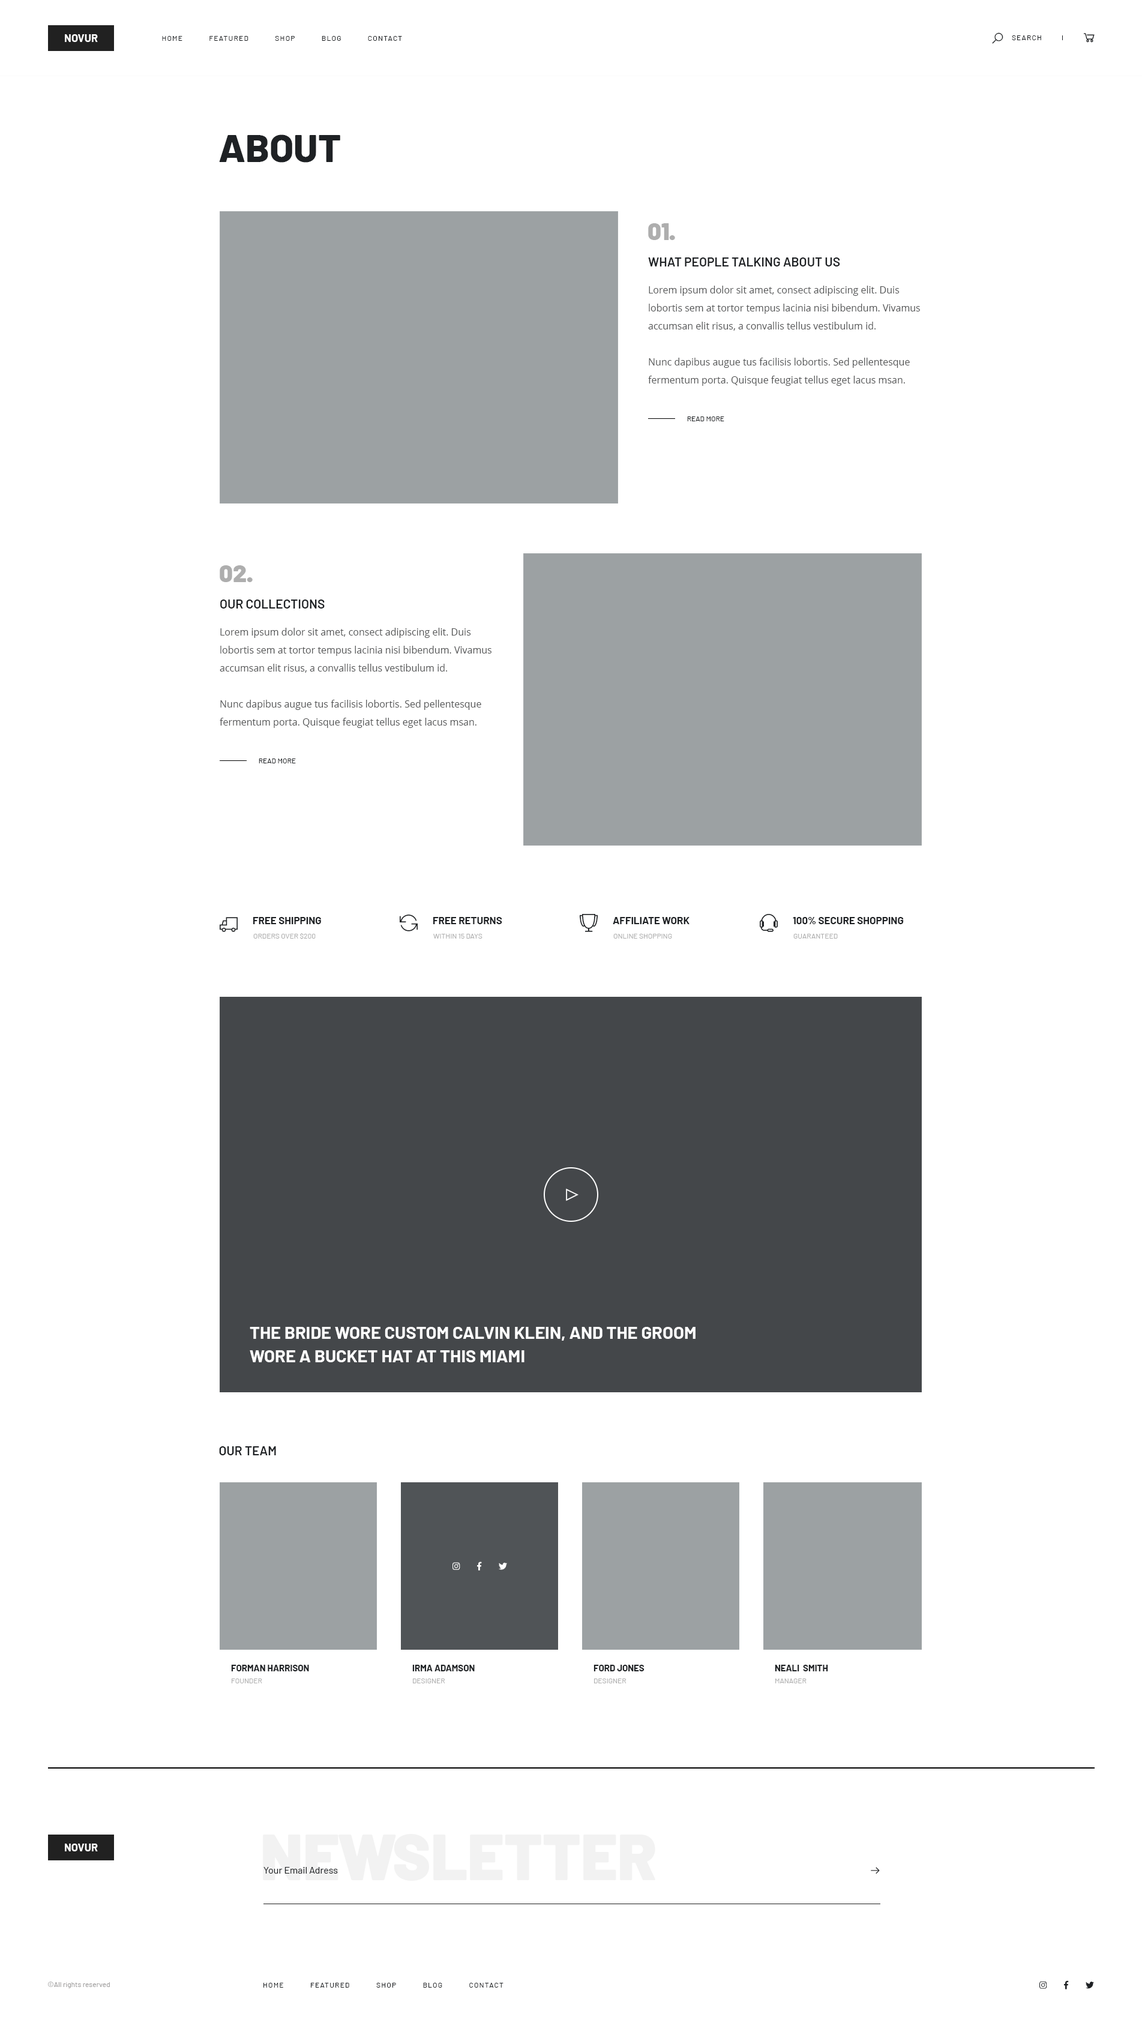
<style>
.page{position:relative;width:1142px;height:2026px;background:#ffffff}
.page>*{position:absolute;margin:0}
.t1{font:10.8px "Barlow-Bold";color:#fefefe;text-transform:uppercase}
.t2{font:7.2px "Barlow-Regular";letter-spacing:0.1em;color:#1e2124;text-transform:uppercase}
.t3{font:39px "Barlow-ExtraBold";color:#1e2124;text-transform:uppercase}
.t4{font:24px "Barlow-Black";color:#aeaeae;text-transform:uppercase}
.t5{font:12.6px "Barlow-SemiBold";color:#1e2124;text-transform:uppercase}
.t6{font:9.6px/18px "OpenSans";color:#535455}
.t7{font:7.2px "Barlow-Regular";color:#1e2124;text-transform:uppercase}
.t8{font:10.2px "Barlow-Bold";color:#1e2124;text-transform:uppercase}
.t9{font:7.2px "Barlow-Regular";color:#aeaeae;text-transform:uppercase}
.t10{font:17.4px/23.4px "Barlow-Bold";color:#ffffff;text-transform:uppercase}
.t11{font:9px "Barlow-Bold";color:#1e2124;text-transform:uppercase}
.t12{font:64.2px "Barlow-Black";color:#f2f2f2}
.t13{font:9.6px "Barlow-Regular";color:#1e2124}
.t14{font:7.2px "Barlow-Regular";color:#9e9d9d}
</style>
<div class="page">
<p class="t1" style="left:65px;top:34px;width:33px;height:8px">novur</p>
<p class="t2" style="left:162px;top:36px;width:240px;height:5px">Home            Featured            Shop            Blog            Contact</p>
<p class="t2" style="left:1012px;top:35px;width:29px;height:5px">Search</p>
<p class="t3" style="left:219px;top:134px;width:121px;height:29px">About</p>
<p class="t4" style="left:648px;top:223px;width:27px;height:17px">01.</p>
<p class="t5" style="left:648px;top:257px;width:192px;height:9px">What People talking about us</p>
<p class="t6" style="left:648px;top:286px;width:272px;height:100px">Lorem ipsum dolor sit amet, consect adipiscing elit. Duis lobortis sem at tortor tempus lacinia nisi bibendum. Vivamus accumsan elit risus, a convallis tellus vestibulum id. <br><br>Nunc dapibus augue tus facilisis lobortis. Sed pellentesque fermentum porta. Quisque feugiat tellus eget lacus msan.</p>
<p class="t7" style="left:687px;top:416px;width:37px;height:5px">Read More</p>
<p class="t4" style="left:220px;top:565px;width:33px;height:17px">02.</p>
<p class="t5" style="left:220px;top:599px;width:105px;height:9px">Our Collections</p>
<p class="t6" style="left:220px;top:628px;width:271px;height:100px">Lorem ipsum dolor sit amet, consect adipiscing elit. Duis lobortis sem at tortor tempus lacinia nisi bibendum. Vivamus accumsan elit risus, a convallis tellus vestibulum id. <br><br>Nunc dapibus augue tus facilisis lobortis. Sed pellentesque fermentum porta. Quisque feugiat tellus eget lacus msan.</p>
<p class="t7" style="left:259px;top:758px;width:37px;height:5px">Read More</p>
<p class="t8" style="left:253px;top:917px;width:68px;height:7px">Free Shipping</p>
<p class="t8" style="left:433px;top:917px;width:69px;height:7px">Free Returns</p>
<p class="t8" style="left:613px;top:917px;width:76px;height:7px">Affiliate Work</p>
<p class="t8" style="left:793px;top:917px;width:111px;height:7px">100% Secure Shopping</p>
<p class="t9" style="left:253px;top:933px;width:63px;height:6px">Orders over $200</p>
<p class="t9" style="left:433px;top:934px;width:49px;height:4px">Within 15 days</p>
<p class="t9" style="left:613px;top:934px;width:59px;height:4px">Online Shopping</p>
<p class="t9" style="left:793px;top:934px;width:45px;height:4px">Guaranteed</p>
<p class="t10" style="left:250px;top:1327px;width:445px;height:35px">The Bride Wore Custom Calvin Klein, and the Groom <br>Wore a Bucket Hat at This Miami</p>
<p class="t5" style="left:219px;top:1446px;width:57px;height:9px">Our Team</p>
<p class="t11" style="left:231px;top:1664px;width:78px;height:7px">Forman Harrison</p>
<p class="t11" style="left:412px;top:1664px;width:63px;height:7px">Irma Adamson</p>
<p class="t11" style="left:593px;top:1664px;width:51px;height:7px">Ford Jones</p>
<p class="t11" style="left:775px;top:1664px;width:53px;height:7px">Neali  Smith</p>
<p class="t9" style="left:232px;top:1678px;width:30px;height:5px">Founder</p>
<p class="t9" style="left:413px;top:1678px;width:32px;height:5px">Designer</p>
<p class="t9" style="left:594px;top:1678px;width:32px;height:5px">Designer</p>
<p class="t9" style="left:775px;top:1678px;width:31px;height:5px">Manager</p>
<p class="t12" style="left:263px;top:1834px;width:392px;height:46px">NEWSLETTER</p>
<p class="t1" style="left:65px;top:1843px;width:33px;height:8px">Novur</p>
<p class="t13" style="left:263px;top:1867px;width:75px;height:6px">Your Email Adress</p>
<p class="t14" style="left:48px;top:1981px;width:62px;height:7px">©All rights reserved</p>
<p class="t2" style="left:263px;top:1982px;width:240px;height:5px">Home            Featured            Shop            Blog            Contact</p>
</div>
